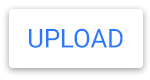
<style>
.page{position:relative;width:150px;height:80px;background:#ffffff}
.page>*{position:absolute;margin:0}
.t1{font:26px "Roboto-Regular";color:#2979ff}
</style>
<div class="page">
<p class="t1" style="left:29px;top:28px;width:94px;height:20px">UPLOAD</p>
</div>
